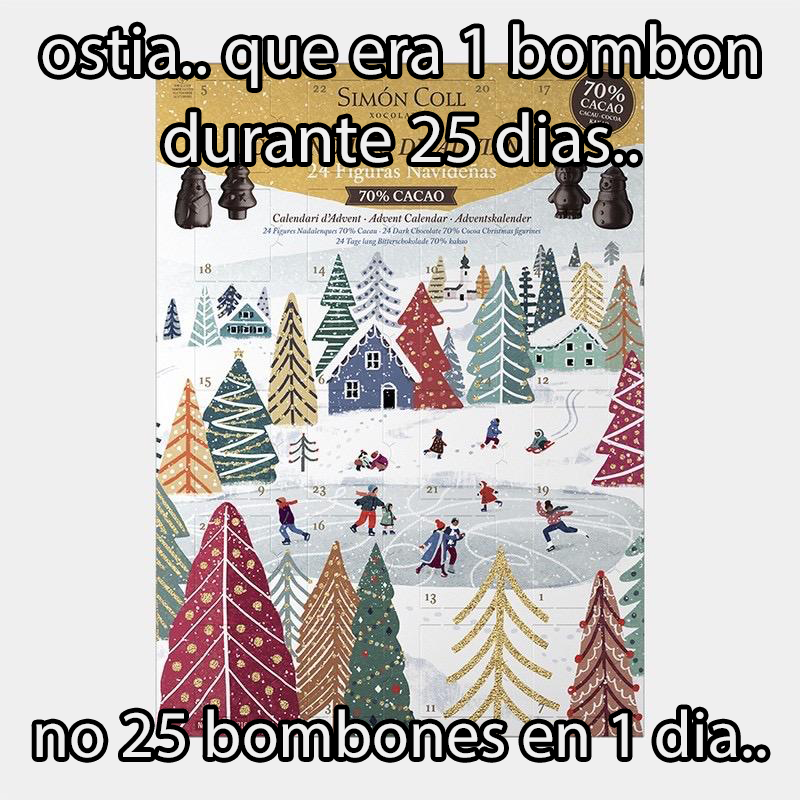
<style>
.page{position:relative;width:800px;height:800px;background:#efefef}
.page>*{position:absolute;margin:0}
.t1{font:70.1px "MyriadPro-Regular";color:#efefef}
.t2{font:67px "MyriadPro-Regular";color:#efefef}
</style>
<div class="page">
<p class="t1" style="left:42px;top:24px;width:715px;height:139px;text-align:center">ostia.. que era 1 bombon<br>durante 25 dias..</p>
<p class="t2" style="left:36px;top:709px;width:730px;height:49px">no 25 bombones en 1 dia..</p>
</div>
